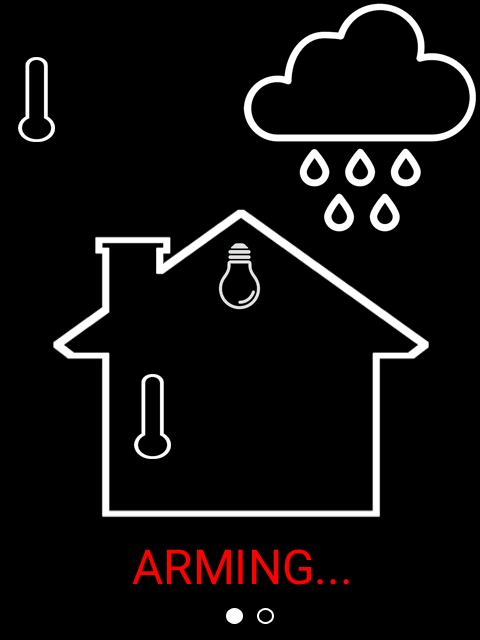
<style>
.page{position:relative;width:480px;height:640px;background:#000000}
.page>*{position:absolute;margin:0}
.t1{font:48px "Roboto-Regular";color:#fe0000}
</style>
<div class="page">
<p class="t1" style="left:132px;top:549px;width:217px;height:36px">ARMING...</p>
</div>
